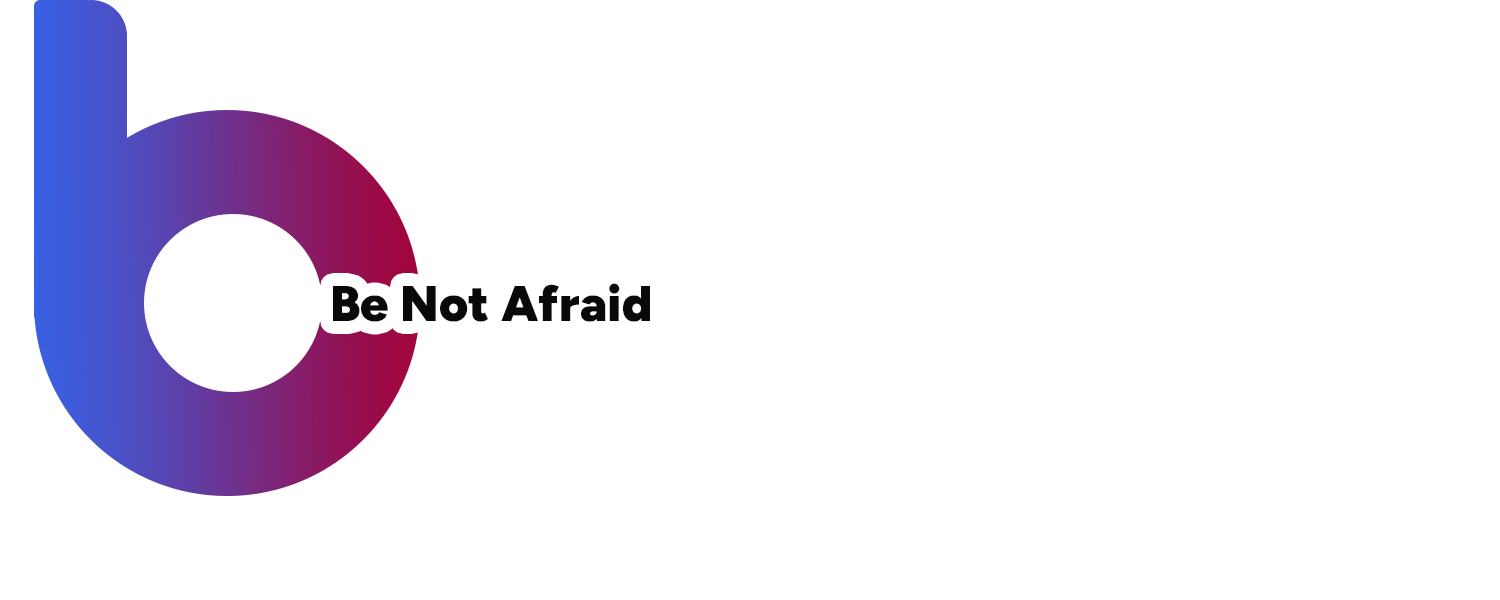
<style>
.page{position:relative;width:1500px;height:600px;background:#ffffff}
.page>*{position:absolute;margin:0}
.t1{font:50px "Figtree-Black";color:#090909}
</style>
<div class="page">
<p class="t1" style="left:333px;top:283px;width:317px;height:39px">Be Not Afraid</p>
</div>
